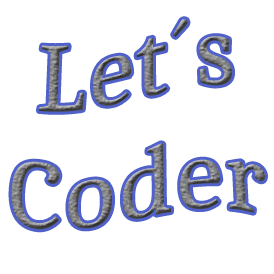
<style>
.page{position:relative;width:274px;height:274px;background:#ffffff}
.page>*{position:absolute;margin:0}
.t1{font:100px "Caladea-Regular"}
</style>
<div class="page">
<p class="t1" style="left:11px;top:19px;width:254px;height:211px;text-align:center">Let´s<br>Coder</p>
</div>
